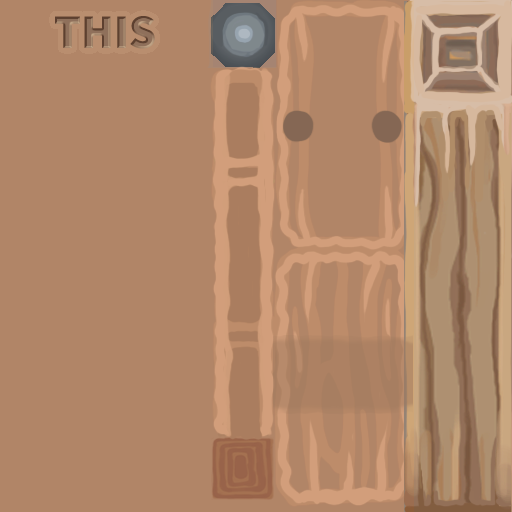
<style>
.page{position:relative;width:512px;height:512px;background:#b18567}
.page>*{position:absolute;margin:0}
.t1{font:48px "SourceSansPro-Black";color:#92725b}
</style>
<div class="page">
<p class="t1" style="left:55px;top:16px;width:100px;height:33px;opacity:0.89">THIS</p>
</div>
